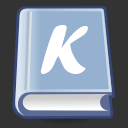
<style>
.page{position:relative;width:128px;height:128px;background:#333333}
.page>*{position:absolute;margin:0}
.t1{font:72px "ForteMT";color:#ffffff}
</style>
<div class="page">
<p class="t1" style="left:40px;top:25px;width:48px;height:49px">K</p>
</div>
